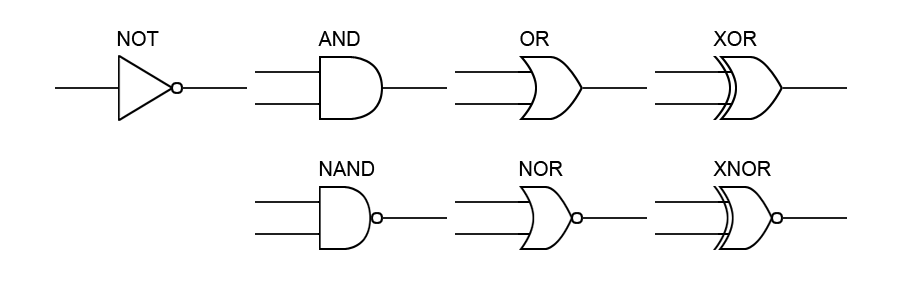
<style>
.page{position:relative;width:900px;height:300px;background:#ffffff}
.page>*{position:absolute;margin:0}
.t1{font:20px "ArialMT";color:#000000}
</style>
<div class="page">
<p class="t1" style="left:117px;top:31px;width:42px;height:15px">NOT</p>
<p class="t1" style="left:318px;top:31px;width:42px;height:15px">AND</p>
<p class="t1" style="left:520px;top:31px;width:29px;height:15px">OR</p>
<p class="t1" style="left:713px;top:31px;width:44px;height:15px">XOR</p>
<p class="t1" style="left:319px;top:161px;width:56px;height:15px">NAND</p>
<p class="t1" style="left:519px;top:161px;width:44px;height:15px">NOR</p>
<p class="t1" style="left:713px;top:161px;width:58px;height:15px">XNOR</p>
</div>
